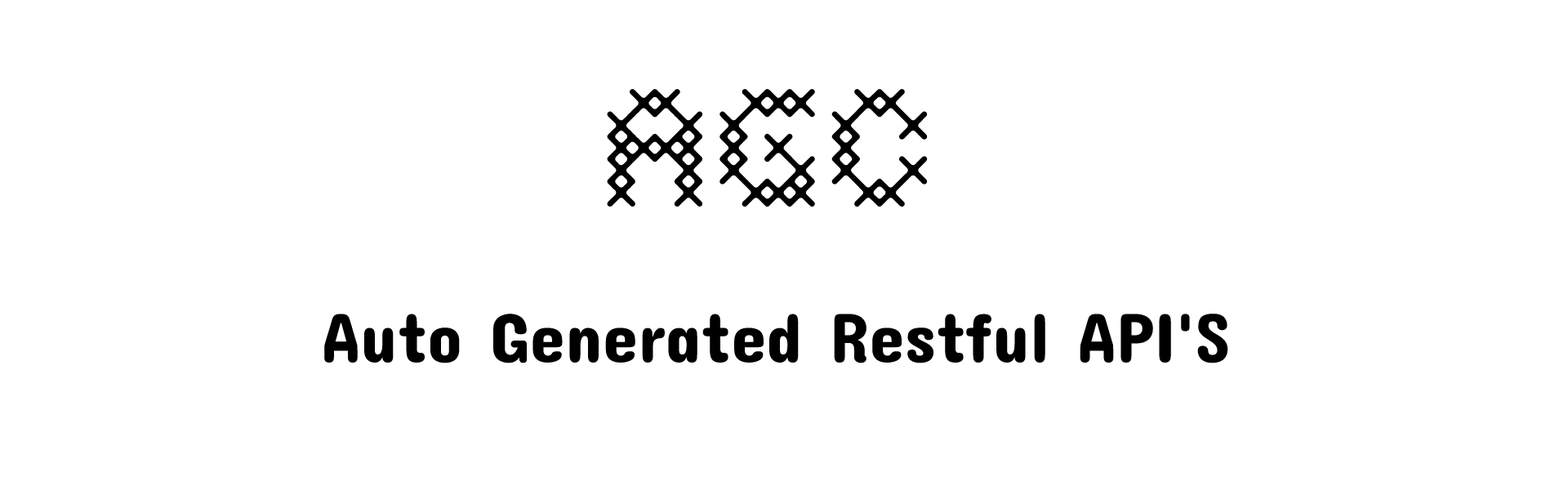
<style>
.page{position:relative;width:1568px;height:490px;background:#ffffff}
.page>*{position:absolute;margin:0}
.t1{font:147px "Costura-Light";color:#000000}
.t2{font:71px "ConcertOne-Regular";color:#000000}
</style>
<div class="page">
<p class="t1" style="left:607px;top:88px;width:321px;height:119px">AGC</p>
<p class="t2" style="left:324px;top:314px;width:904px;height:49px">Auto Generated Restful API'S</p>
</div>
